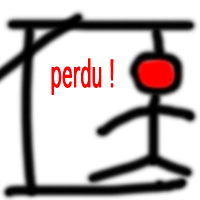
<style>
.page{position:relative;width:200px;height:200px;background:#ffffff}
.page>*{position:absolute;margin:0}
.t1{font:36px "GenevaCY";color:#ff0000;font-weight:bold;scale:0.5 1}
</style>
<div class="page">
<p class="t1" style="left:51px;top:58px;width:63px;height:37px">perdu !</p>
</div>
